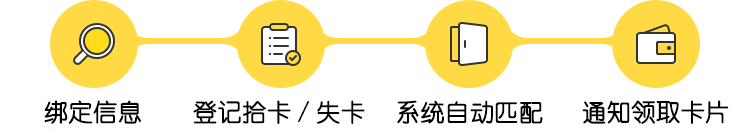
<style>
.page{position:relative;width:750px;height:133px;background:#ffffff}
.page>*{position:absolute;margin:0}
.t1{font:24px "YouYuan";color:#000000;font-weight:bold}
</style>
<div class="page">
<p class="t1" style="left:44px;top:100px;width:97px;height:24px">绑定信息</p>
<p class="t1" style="left:193px;top:100px;width:172px;height:24px">登记拾卡/失卡</p>
<p class="t1" style="left:397px;top:100px;width:146px;height:24px">系统自动匹配</p>
<p class="t1" style="left:582px;top:100px;width:147px;height:24px">通知领取卡片</p>
</div>
